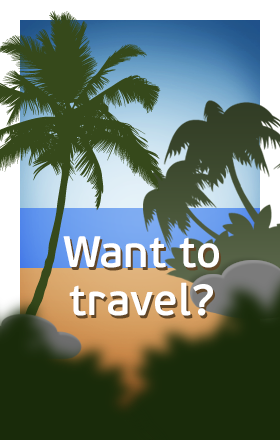
<style>
.page{position:relative;width:280px;height:440px}
.page>*{position:absolute;margin:0}
.t1{font:44px/48px "PFBeauSansPro-SemiBold";color:#ffffff}
</style>
<div class="page">
<p class="t1" style="left:63px;top:236px;width:156px;height:80px;text-align:center">Want to<br>travel?</p>
</div>
